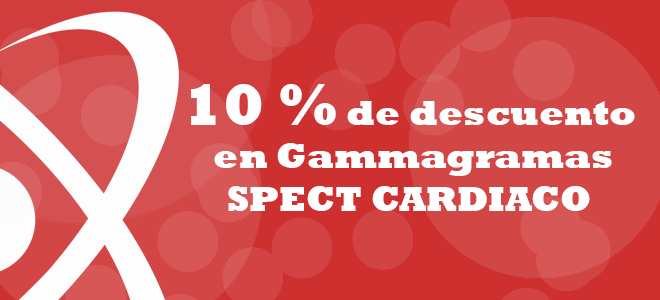
<style>
.page{position:relative;width:660px;height:300px;background:#d34646}
.page>*{position:absolute;margin:0}
.t1{font:36px "Rockwell-ExtraBold";color:#ffffff}
.t2{font:60px "Rockwell-ExtraBold";color:#ffffff}
</style>
<div class="page">
<p class="t1" style="left:191px;top:84px;width:444px;height:127px;text-align:center"><span class="t2">10 %</span> de descuento<br> en Gammagramas SPECT CARDIACO</p>
</div>
